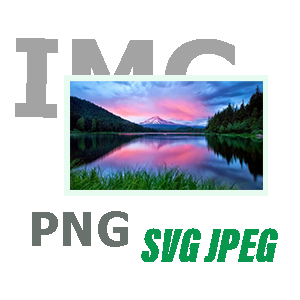
<style>
.page{position:relative;width:300px;height:300px;background:#ffffff}
.page>*{position:absolute;margin:0}
.t1{font:109px "Tahoma-Bold"}
.t2{font:47px "Tahoma-Bold";color:#69716d}
.t3{font:49.7px "AcuminConcept-ExtraCondensedUltraBlackItalic";color:#08984d}
</style>
<div class="page">
<p class="t1" style="left:15px;top:38px;width:220px;height:84px;rotate:1deg">IMG</p>
<p class="t2" style="left:32px;top:211px;width:96px;height:36px">PNG</p>
<p class="t3" style="left:141px;top:228px;width:137px;height:34px">SVG JPEG</p>
</div>
